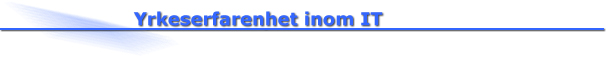
<style>
.page{position:relative;width:606px;height:57px;background:#ffffff}
.page>*{position:absolute;margin:0}
.t1{font:18px "Verdana-Bold";color:#3366ff}
</style>
<div class="page">
<p class="t1" style="left:133px;top:11px;width:250px;height:15px">Yrkeserfarenhet inom IT</p>
</div>
